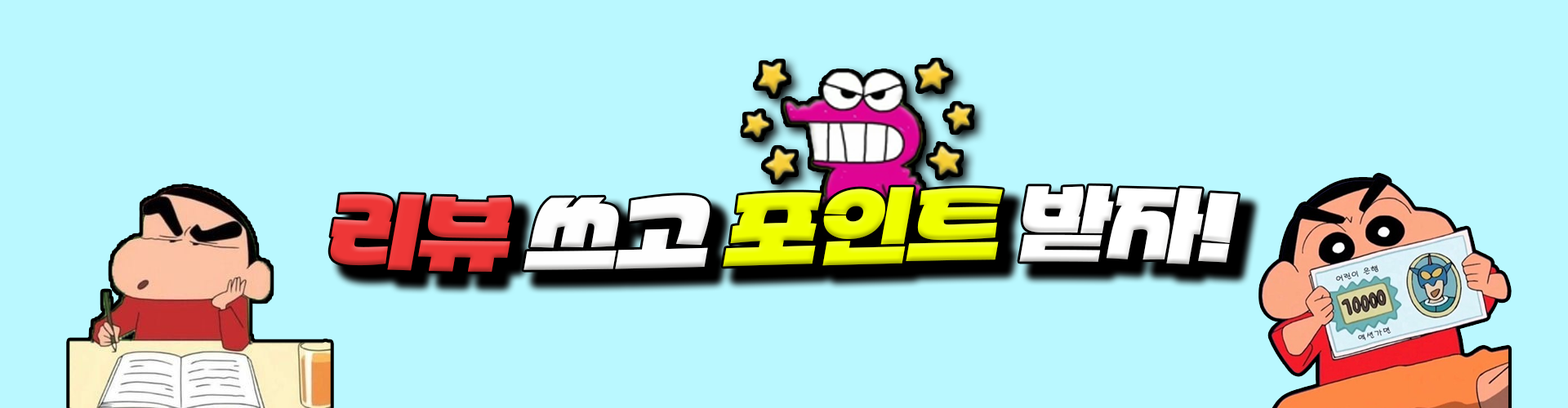
<style>
.page{position:relative;width:1568px;height:408px;background:#baf8ff}
.page>*{position:absolute;margin:0}
.t1{font:81.7px "Partial-Sans-KR";color:#f0ff00;font-style:italic}
.t2{font:81.7px "Partial-Sans-KR";color:#ee3737;font-style:italic}
.t3{font:81.7px "Partial-Sans-KR";color:#fefefe;font-style:italic}
.t4{font:81.7px "Partial-Sans-KR";color:#ffffff;font-style:italic}
</style>
<div class="page">
<p class="t1" style="left:330px;top:185px;width:909px;height:87px"><span class="t2">리뷰 </span><span class="t3">쓰고 </span>포인트 <span class="t4">받자!</span></p>
</div>
